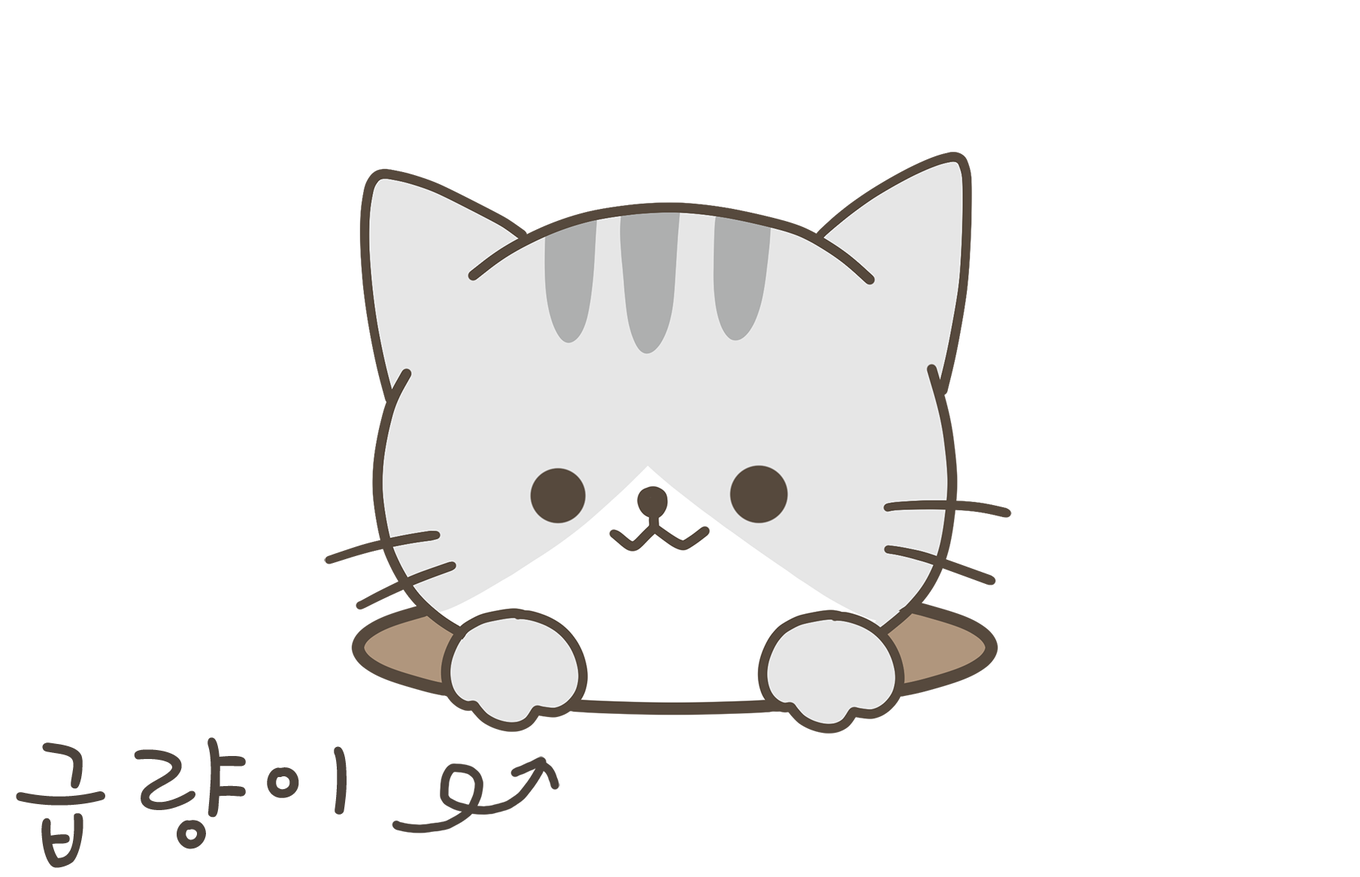
<style>
.page{position:relative;width:1360px;height:877px;background:#ffffff}
.page>*{position:absolute;margin:0}
.t1{font:153.5px "HiMelody-Regular";color:#4c433c}
</style>
<div class="page">
<p class="t1" style="left:16px;top:737px;width:330px;height:131px">급량이</p>
</div>
